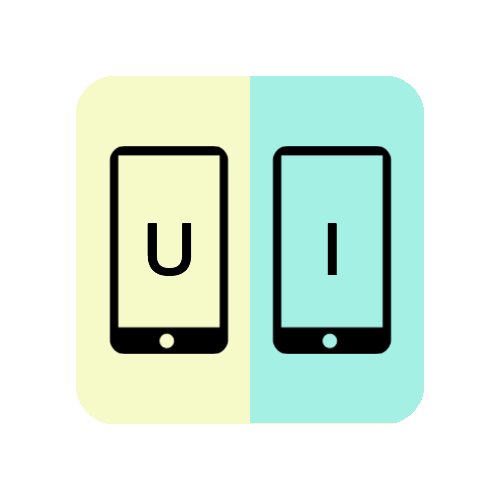
<style>
.page{position:relative;width:500px;height:500px;background:#ffffff}
.page>*{position:absolute;margin:0}
.t1{font:72px "PingFangSC-Semibold";color:#000000}
</style>
<div class="page">
<p class="t1" style="left:147px;top:223px;width:45px;height:53px">U</p>
<p class="t1" style="left:327px;top:223px;width:10px;height:52px">I</p>
</div>
